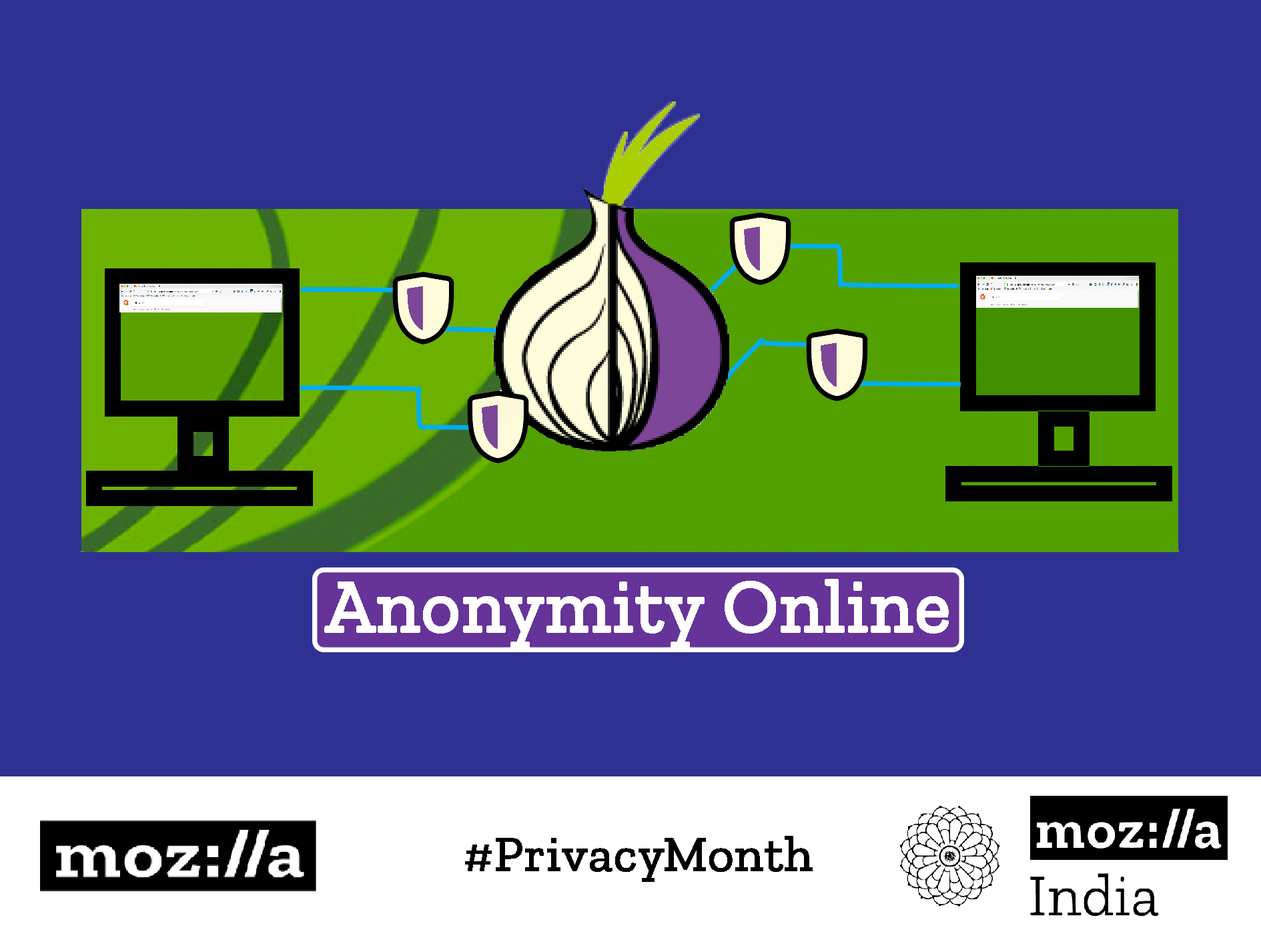
<style>
.page{position:relative;width:1261px;height:946px;background:#2e3192}
.page>*{position:absolute;margin:0}
.t1{font:75.1px "ZillaSlab-Regular";color:#ffffff;font-weight:bold}
.t2{font:50px "ZillaSlab-Regular";color:#000000;font-weight:bold}
</style>
<div class="page">
<p class="t1" style="left:324px;top:579px;width:625px;height:70px">Anonymity Online</p>
<p class="t2" style="left:465px;top:835px;width:348px;height:46px">#PrivacyMonth</p>
</div>
